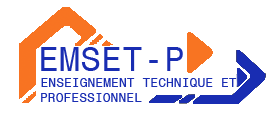
<style>
.page{position:relative;width:272px;height:119px;background:#ffffff}
.page>*{position:absolute;margin:0}
.t1{font:35px "Monospace821BT-Roman";color:#192db2}
.t2{font:13px "Monospace821BT-Roman";color:#192db2}
</style>
<div class="page">
<p class="t1" style="left:41px;top:47px;width:142px;height:24px">EMSET-P</p>
<p class="t2" style="left:41px;top:78px;width:196px;height:9px">ENSEIGNEMENT TECHNIQUE ET</p>
<p class="t2" style="left:41px;top:93px;width:101px;height:9px">PROFESSIONNEL</p>
</div>
